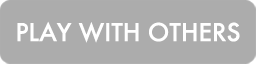
<style>
.page{position:relative;width:256px;height:64px;background:#acacac}
.page>*{position:absolute;margin:0}
.t1{font:24px "Futura-Medium";color:#ffffff}
</style>
<div class="page">
<p class="t1" style="left:17px;top:21px;width:223px;height:22px">PLAY WITH OTHERS</p>
</div>
